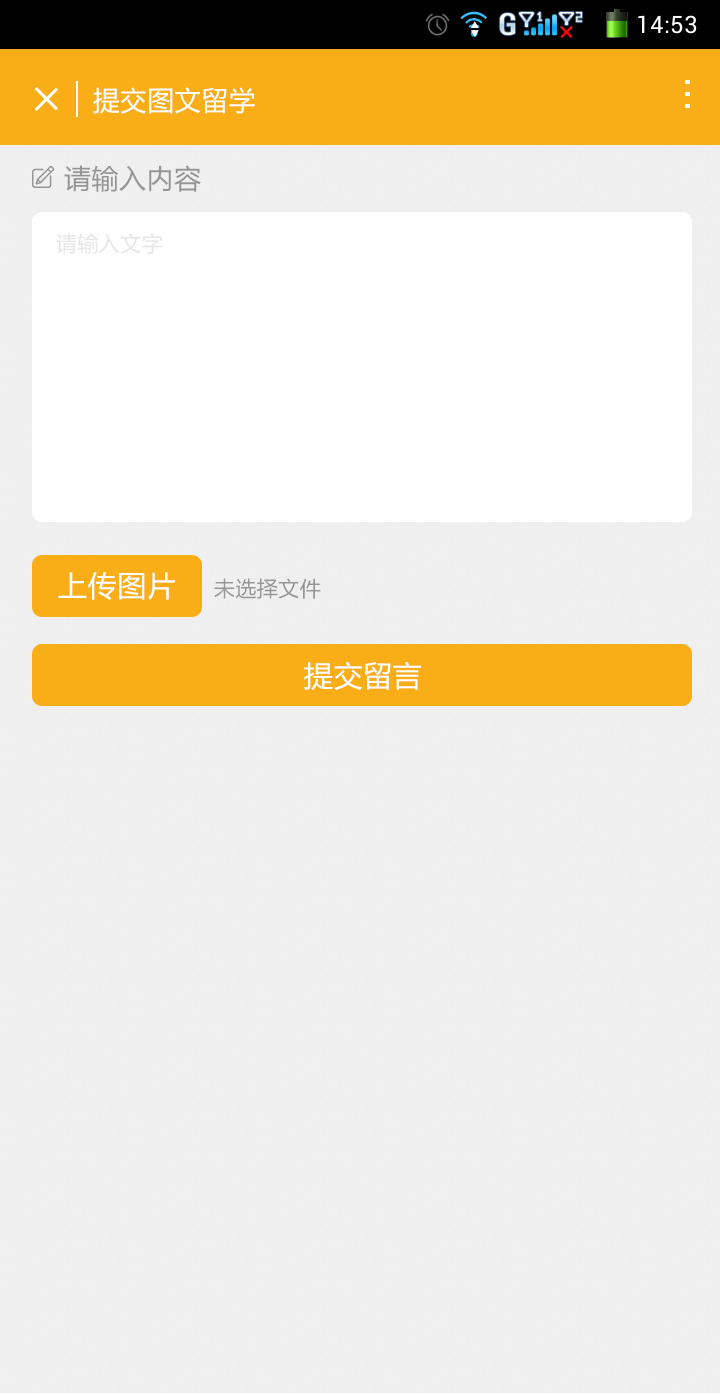
<style>
.page{position:relative;width:720px;height:1394px;background:#f0f0f0}
.page>*{position:absolute;margin:0}
.t1{font:27px "MicrosoftYaHei";letter-spacing:0.02em;color:#ffffff}
.t2{font:27px "MicrosoftYaHei";letter-spacing:0.02em;color:#959595}
.t3{font:21px "MicrosoftYaHei";letter-spacing:0.02em;color:#e5e5e5}
.t4{font:29px "MicrosoftYaHei";letter-spacing:0.02em;color:#ffffff}
.t5{font:21px "MicrosoftYaHei";letter-spacing:0.02em;color:#959595}
</style>
<div class="page">
<p class="t1" style="left:93px;top:87px;width:162px;height:27px">提交图文留学</p>
<p class="t2" style="left:64px;top:165px;width:137px;height:27px">请输入内容</p>
<p class="t3" style="left:56px;top:233px;width:107px;height:21px">请输入文字</p>
<p class="t4" style="left:58px;top:572px;width:117px;height:28px">上传图片</p>
<p class="t5" style="left:214px;top:578px;width:107px;height:21px">未选择文件</p>
<p class="t4" style="left:304px;top:661px;width:117px;height:29px">提交留言</p>
</div>
